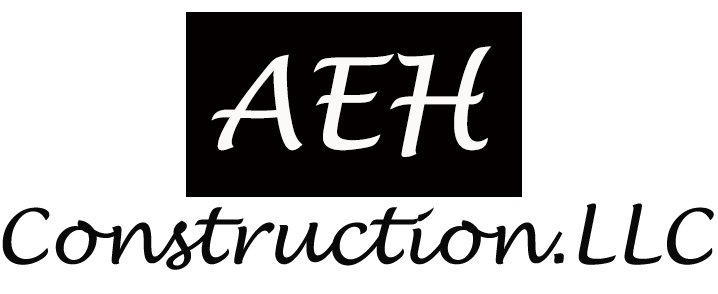
<style>
.page{position:relative;width:718px;height:294px;background:#ffffff}
.page>*{position:absolute;margin:0}
.t1{font:125px "LucidaHandwriting-Italic";color:#fcf9f9}
.t2{font:75px "LucidaHandwriting-Italic";color:#080808}
</style>
<div class="page">
<p class="t1" style="left:211px;top:46px;width:280px;height:111px">AEH</p>
<p class="t2" style="left:2px;top:203px;width:712px;height:67px">Construction.LLC</p>
</div>
